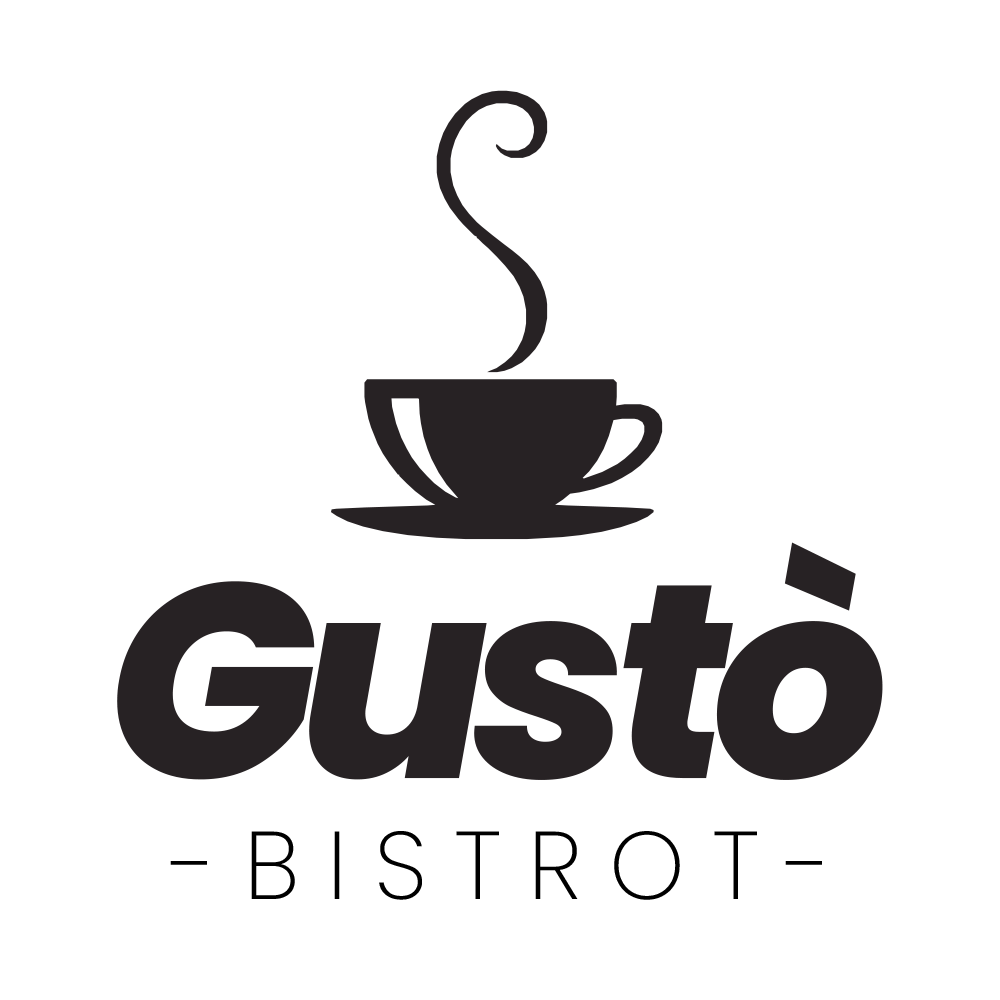
<style>
.page{position:relative;width:1000px;height:1000px;background:#ffffff}
.page>*{position:absolute;margin:0}
.t1{font:276.2px "Poppins-ExtraBoldItalic";letter-spacing:-0.06em;color:#272224}
.t2{font:96px "Poppins-ExtraLight";letter-spacing:0.28em;color:#000000;text-transform:uppercase}
</style>
<div class="page">
<p class="t1" style="left:117px;top:542px;width:766px;height:238px">Gustò</p>
<p class="t2" style="left:170px;top:831px;width:652px;height:69px">-Bistrot-</p>
</div>
